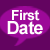
<style>
.page{position:relative;width:50px;height:50px;background:#630460}
.page>*{position:absolute;margin:0}
.t1{font:14px "Arial-BoldMT";letter-spacing:-0.04em;color:#fffcfd}
.t2{font:18px "Arial-BoldMT";letter-spacing:-0.04em;color:#fffcfd}
</style>
<div class="page">
<p class="t1" style="left:12px;top:10px;width:28px;height:11px">First</p>
<p class="t2" style="left:7px;top:21px;width:36px;height:14px">Date</p>
</div>
